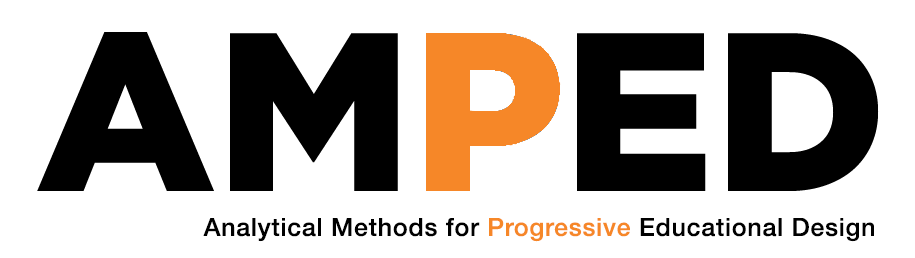
<style>
.page{position:relative;width:915px;height:258px;background:#ffffff}
.page>*{position:absolute;margin:0}
.t1{font:25px "HelveticaNeue-Medium";letter-spacing:0.03em;color:#000000}
.t2{font:25px "HelveticaNeue-Medium";letter-spacing:0.03em;color:#f68728}
</style>
<div class="page">
<p class="t1" style="left:203px;top:218px;width:671px;height:24px">Analytical Methods for <span class="t2">Progressive</span> Educational Design</p>
</div>
